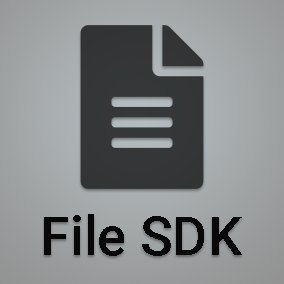
<style>
.page{position:relative;width:284px;height:284px}
.page>*{position:absolute;margin:0}
.t1{font:54px "Roboto-Medium";color:#080808}
</style>
<div class="page">
<p class="t1" style="left:44px;top:214px;width:198px;height:42px">File SDK</p>
</div>
